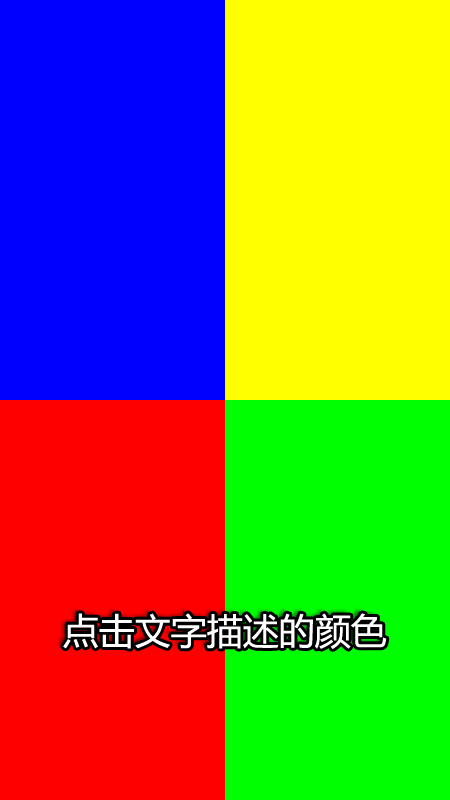
<style>
.page{position:relative;width:450px;height:800px;background:#ffff00}
.page>*{position:absolute;margin:0}
.t1{font:36px "MicrosoftYaHei";color:#ffffff}
</style>
<div class="page">
<p class="t1" style="left:63px;top:613px;width:324px;height:36px">点击文字描述的颜色</p>
</div>
